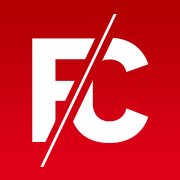
<style>
.page{position:relative;width:180px;height:180px}
.page>*{position:absolute;margin:0}
.t1{font:148.5px "PFDinTextUniversal-Bold";color:#ffffff}
.t2{font:148.5px "PFDinTextUniversal-Bold"}
</style>
<div class="page">
<p class="t1" style="left:32px;top:38px;width:74px;height:104px">F</p>
<p class="t2" style="left:69px;top:37px;width:80px;height:106px">C</p>
</div>
